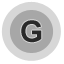
<style>
.page{position:relative;width:64px;height:64px;background:#ffffff}
.page>*{position:absolute;margin:0}
.t1{font:30px "Arial-BoldMT";color:#2a2a2a}
</style>
<div class="page">
<p class="t1" style="left:21px;top:20px;width:21px;height:23px">G</p>
</div>
